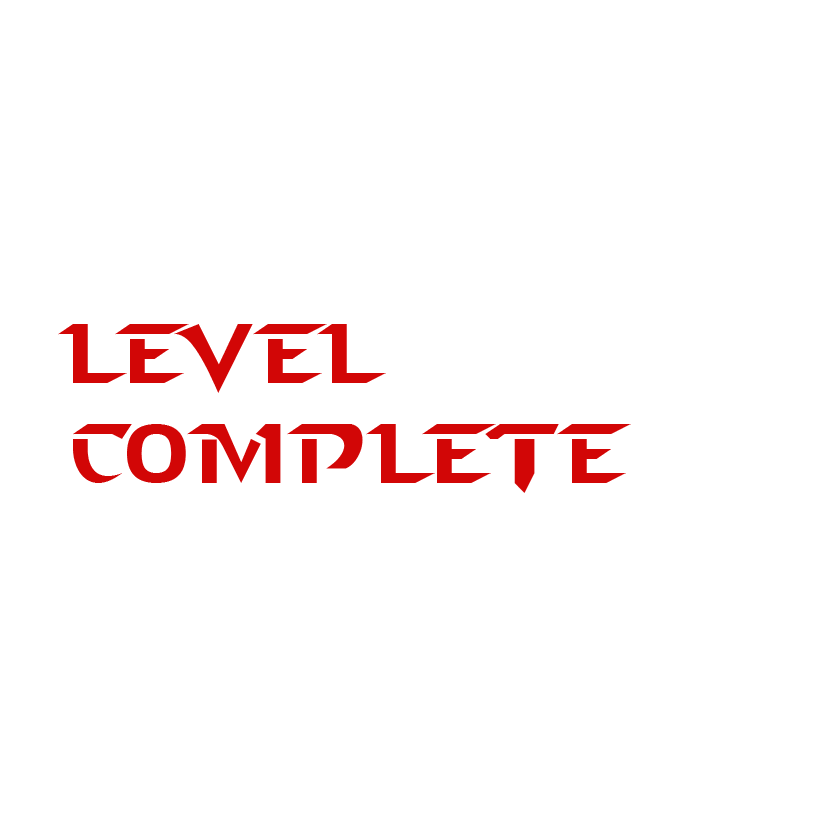
<style>
.page{position:relative;width:836px;height:836px;background:#ffffff}
.page>*{position:absolute;margin:0}
.t1{font:83.7px "StarcraftNormal";color:#d20606}
</style>
<div class="page">
<p class="t1" style="left:58px;top:324px;width:573px;height:169px">Level <br>Complete</p>
</div>
